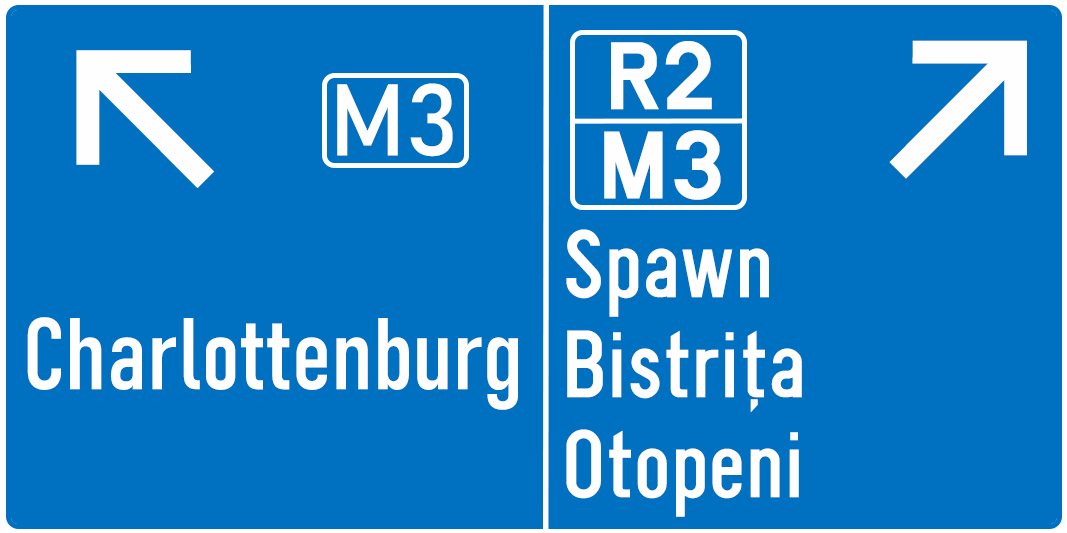
<style>
.page{position:relative;width:1067px;height:533px;background:#0070c0}
.page>*{position:absolute;margin:0}
.t1{font:100px "SnvD-Regu";color:#fefefe}
.t2{font:250px "InterV-Medium";color:#fefefe}
.t3{font:100px "Bahnschrift";color:#fefefe}
.t4{font:100px/100px "SnvBeckerRegCond";color:#fefefe}
.t5{font:100px "Bahnschrift-Condensed";color:#fefefe}
</style>
<div class="page">
<p class="t1" style="left:611px;top:41px;width:101px;height:69px">R2</p>
<p class="t2" style="left:889px;top:40px;width:138px;height:139px">↗</p>
<p class="t2" style="left:76px;top:50px;width:138px;height:138px">↖</p>
<p class="t3" style="left:337px;top:83px;width:116px;height:74px">M3</p>
<p class="t1" style="left:604px;top:130px;width:117px;height:70px">M3</p>
<p class="t4" style="left:566px;top:229px;width:236px;height:288px">Spawn<br>Bistrița<br>Otopeni</p>
<p class="t5" style="left:27px;top:317px;width:491px;height:93px">Charlottenburg</p>
</div>
